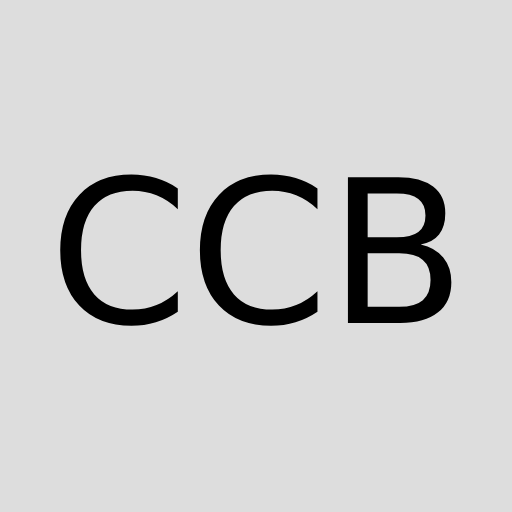
<style>
.page{position:relative;width:512px;height:512px;background:#dddddd}
.page>*{position:absolute;margin:0}
.t1{font:200px "DejaVuSans";color:#000000}
</style>
<div class="page">
<p class="t1" style="left:60px;top:174px;width:392px;height:152px">CCB</p>
</div>
